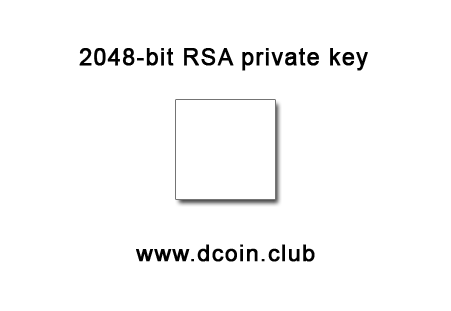
<style>
.page{position:relative;width:451px;height:311px;background:#ffffff}
.page>*{position:absolute;margin:0}
.t1{font:23px "ArialMT";letter-spacing:0.04em;color:#000000;font-weight:bold}
</style>
<div class="page">
<p class="t1" style="left:79px;top:48px;width:289px;height:23px">2048-bit RSA private key</p>
<p class="t1" style="left:136px;top:244px;width:179px;height:18px">www.dcoin.club</p>
</div>
